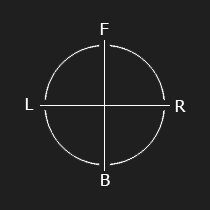
<style>
.page{position:relative;width:210px;height:210px;background:#1f1f1f}
.page>*{position:absolute;margin:0}
.t1{font:16.7px "Tahoma";color:#ffffff}
</style>
<div class="page">
<p class="t1" style="left:100px;top:23px;width:9px;height:12px">F</p>
<p class="t1" style="left:25px;top:98px;width:9px;height:12px">L</p>
<p class="t1" style="left:175px;top:100px;width:11px;height:12px">R</p>
<p class="t1" style="left:101px;top:174px;width:9px;height:12px">B</p>
</div>
